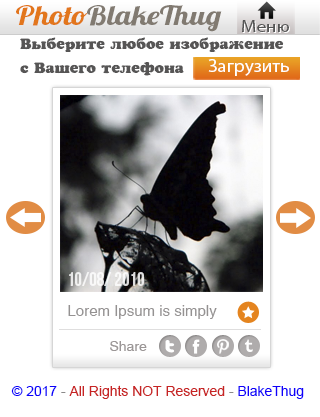
<style>
.page{position:relative;width:320px;height:417px;background:#ffffff}
.page>*{position:absolute;margin:0}
.t1{font:26.7px "Lobster1.4";color:#817a71;scale:1.18 1}
.t2{font:26.7px "Lobster1.4";color:#e2761c;scale:1.18 1}
.t3{font:16.6px "MyriadPro-Regular";color:#545454;scale:1.16 1}
.t4{font:14.7px/12.1px "a_CooperBlackRg";color:#565555;scale:1.05 1}
.t5{font:18px "MyriadPro-Regular";color:#ffffff;scale:1.06 1}
.t6{font:19px "BebasNeue";color:#ffffff}
.t7{font:15px "HelveticaCE-Regular";color:#979393}
.t8{font:14px "HelveticaCE-Regular";color:#9f9898}
.t9{font:12.7px "ArialMT";color:#c72424;scale:1.1 1}
.t10{font:12.7px "ArialMT";color:#0b00fa;scale:1.1 1}
.t11{font:12.7px "ArialMT";color:#8a8989;scale:1.1 1}
.t12{font:12.7px "ArialMT";color:#1100fa;scale:1.1 1}
</style>
<div class="page">
<p class="t1" style="left:16px;top:5px;width:206px;height:27px"><span class="t2">Photo</span>BlakeThug</p>
<p class="t3" style="left:242px;top:20px;width:47px;height:12px">Меню</p>
<p class="t4" style="left:20px;top:37px;width:264px;height:39px">Выберите любое изображение <br><br>с Вашего телефона</p>
<p class="t5" style="left:208px;top:59px;width:81px;height:17px">Загрузить</p>
<p class="t6" style="left:69px;top:272px;width:75px;height:14px;opacity:0.8">10/08/ 2010</p>
<p class="t7" style="left:68px;top:305px;width:149px;height:14px">Lorem Ipsum is simply</p>
<p class="t8" style="left:110px;top:341px;width:37px;height:10px">Share</p>
<p class="t9" style="left:11px;top:385px;width:293px;height:14px"><span class="t10">© 2017</span><span class="t11"> - </span>All Rights NOT Reserved<span class="t11"> - </span><span class="t12">BlakeThug</span></p>
</div>
